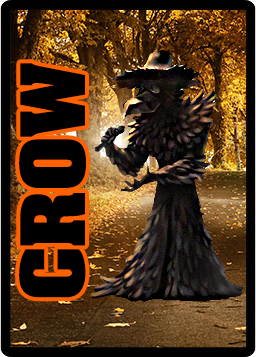
<style>
.page{position:relative;width:256px;height:357px}
.page>*{position:absolute;margin:0}
.t1{font:75px "AardvarkBold";color:#000000}
</style>
<div class="page">
<p class="t1" style="left:19px;top:63px;width:67px;height:235px;rotate:180deg">CROW</p>
</div>
